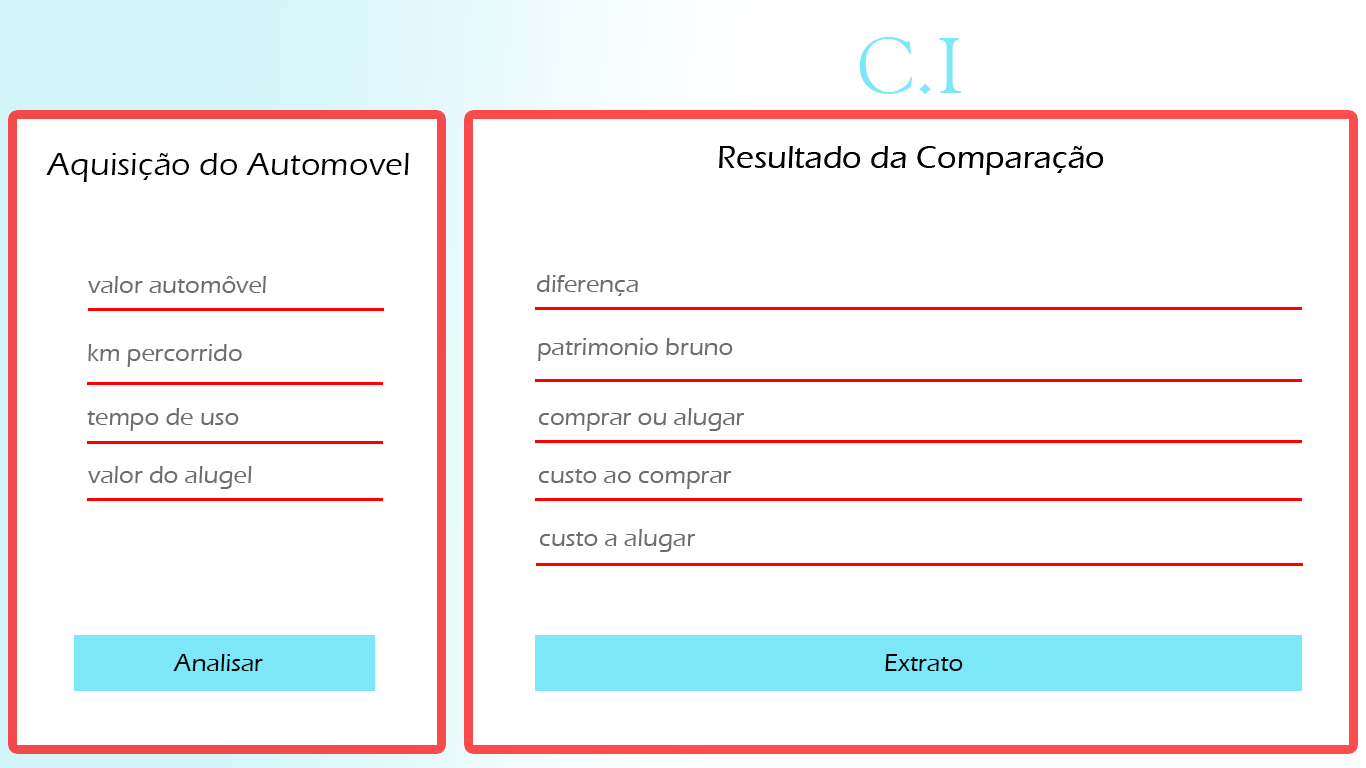
<style>
.page{position:relative;width:1366px;height:768px;background:#ffffff}
.page>*{position:absolute;margin:0}
.t1{font:83.3px "GoudyOldStyleT-Regular";color:#7be7f7}
.t2{font:33.3px "ErasITC-Medium";color:#010000}
.t3{font:33.3px "ErasITC-Medium";color:#000000}
.t4{font:25px "ErasITC-Medium";color:#6e6c6c}
.t5{font:25px "ErasITC-Medium";color:#000000}
</style>
<div class="page">
<p class="t1" style="left:859px;top:37px;width:103px;height:57px">C.I</p>
<p class="t2" style="left:719px;top:146px;width:384px;height:29px">Resultado da Comparação</p>
<p class="t2" style="left:719px;top:146px;width:384px;height:29px">Resultado da Comparação</p>
<p class="t3" style="left:46px;top:153px;width:363px;height:29px">Aquisição do Automovel</p>
<p class="t4" style="left:88px;top:276px;width:178px;height:17px">valor automôvel</p>
<p class="t4" style="left:536px;top:275px;width:102px;height:21px">diferença</p>
<p class="t4" style="left:538px;top:338px;width:195px;height:23px">patrimonio bruno</p>
<p class="t4" style="left:88px;top:344px;width:154px;height:23px">km percorrido</p>
<p class="t4" style="left:87px;top:408px;width:152px;height:23px">tempo de uso</p>
<p class="t4" style="left:538px;top:408px;width:207px;height:23px">comprar ou alugar</p>
<p class="t4" style="left:88px;top:466px;width:164px;height:23px">valor do alugel</p>
<p class="t4" style="left:538px;top:469px;width:194px;height:20px">custo ao comprar</p>
<p class="t4" style="left:539px;top:529px;width:157px;height:23px">custo a alugar</p>
<p class="t5" style="left:173px;top:654px;width:90px;height:17px">Analisar</p>
<p class="t5" style="left:885px;top:654px;width:78px;height:17px">Extrato</p>
</div>
